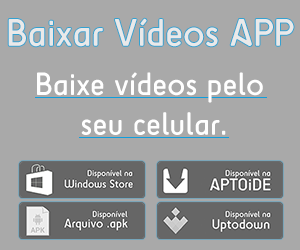
<style>
.page{position:relative;width:300px;height:250px;background:#a9a9a9}
.page>*{position:absolute;margin:0}
.t1{font:39.5px "SciFly-Sans";color:#eae9e9}
.t2{font:33px "SciFly-Sans";color:#ffffff}
</style>
<div class="page">
<p class="t1" style="left:8px;top:18px;width:286px;height:29px">Baixar Vídeos APP</p>
<p class="t2" style="left:37px;top:72px;width:226px;height:63px;text-align:center">Baixe vídeos pelo <br>seu celular.</p>
</div>
